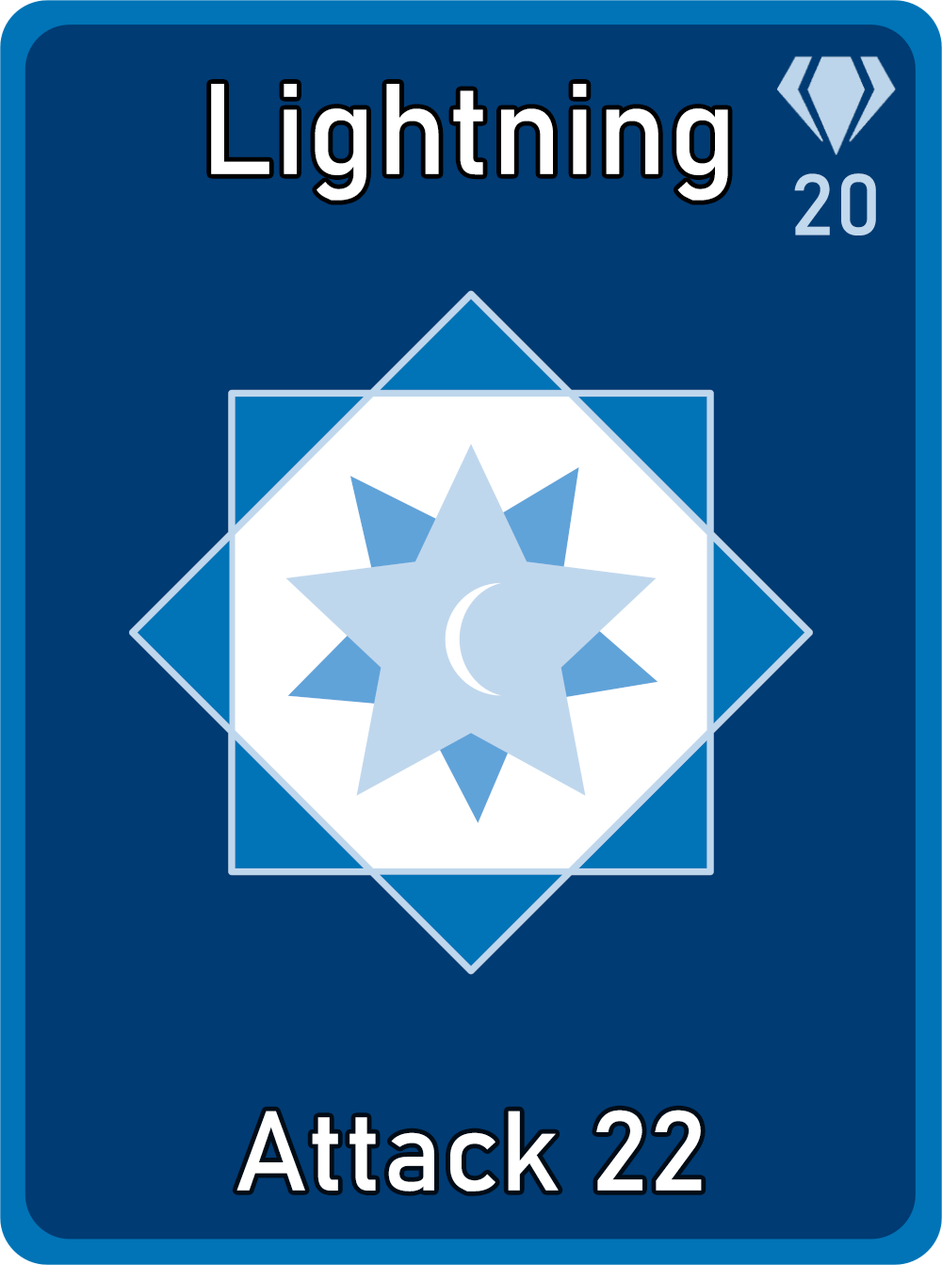
<style>
.page{position:relative;width:942px;height:1265px;background:#003b73}
.page>*{position:absolute;margin:0}
.t1{font:126.7px "Bahnschrift";letter-spacing:0.01em;color:#ffffff}
.t2{font:85px "Bahnschrift";letter-spacing:0.01em;color:#c1d8ed}
.t3{font:111.3px "Bahnschrift";letter-spacing:0.01em;color:#ffffff}
</style>
<div class="page">
<p class="t1" style="left:211px;top:84px;width:517px;height:117px">Lightning</p>
<p class="t2" style="left:794px;top:173px;width:82px;height:63px">20</p>
<p class="t3" style="left:237px;top:1110px;width:465px;height:82px">Attack 22</p>
</div>
